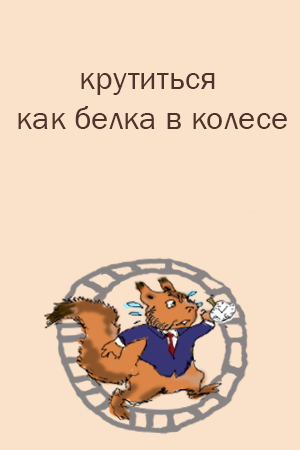
<style>
.page{position:relative;width:300px;height:450px;background:#f9e1ca}
.page>*{position:absolute;margin:0}
.t1{font:33.3px "FranklinGothic-Book";color:#4f332a}
</style>
<div class="page">
<p class="t1" style="left:18px;top:73px;width:269px;height:56px;text-align:center">крутиться <br>как белка в колесе</p>
</div>
